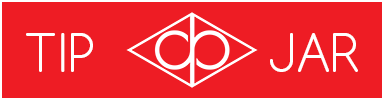
<style>
.page{position:relative;width:384px;height:100px;background:#ee1c24}
.page>*{position:absolute;margin:0}
.t1{font:50px "Comfortaa-Light";color:#ffffff;text-transform:uppercase}
</style>
<div class="page">
<p class="t1" style="left:26px;top:33px;width:67px;height:39px">Tip</p>
<p class="t1" style="left:270px;top:33px;width:88px;height:39px">Jar</p>
</div>
